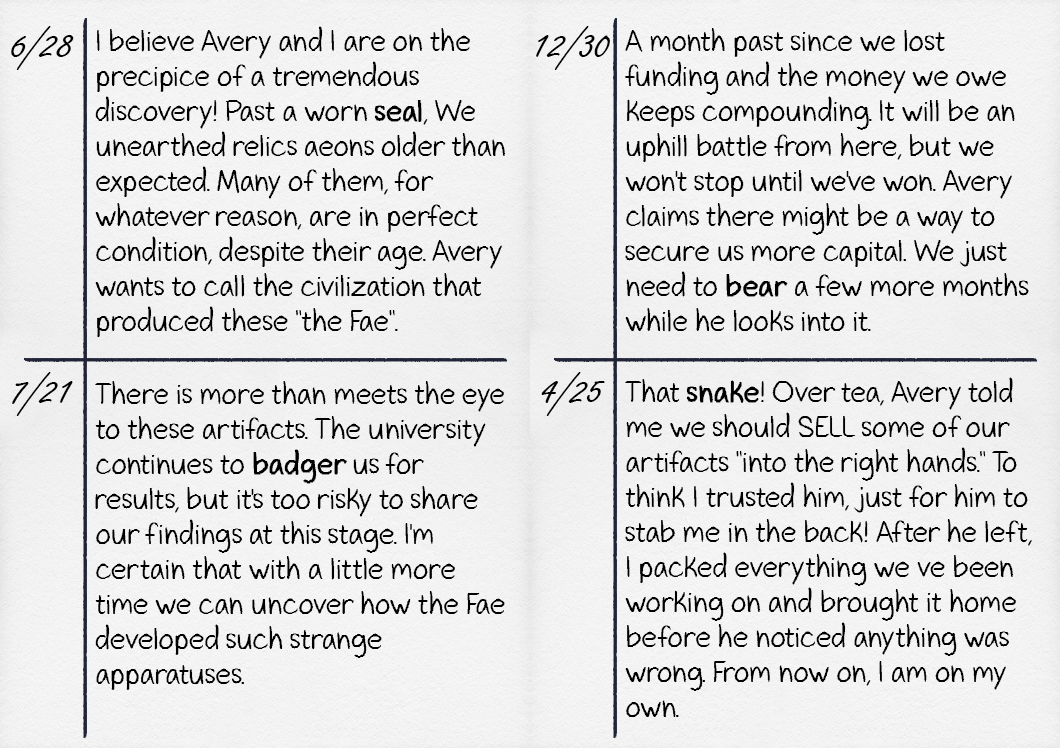
<style>
.page{position:relative;width:1060px;height:750px}
.page>*{position:absolute;margin:0}
.t1{font:45px "FreestyleScript-Regular";color:#000000}
.t2{font:29.2px "GavinScript2";color:#000000}
.t3{font:29.2px "GavinScript2";color:#000000;font-weight:bold}
</style>
<div class="page">
<p class="t1" style="left:11px;top:26px;width:63px;height:44px">6/28</p>
<p class="t2" style="left:95px;top:26px;width:411px;height:311px">I believe Avery and I are on the precipice of a tremendous discovery! Past a worn <span class="t3">seal</span>, We unearthed relics aeons older than expected. Many of them, for whatever reason, are in perfect condition, despite their age. Avery wants to call the civilization that produced these "the Fae".</p>
<p class="t1" style="left:536px;top:26px;width:74px;height:44px">12/30</p>
<p class="t2" style="left:625px;top:28px;width:404px;height:304px">A month past since we lost funding and the money we owe keeps compounding. It will be an uphill battle from here, but we won't stop until we've won. Avery claims there might be a way to secure us more capital. We just need to <span class="t3">bear </span>a few more months while he looks into it.</p>
<p class="t1" style="left:12px;top:372px;width:61px;height:44px">7/21</p>
<p class="t1" style="left:541px;top:372px;width:64px;height:44px">4/25</p>
<p class="t2" style="left:625px;top:377px;width:407px;height:340px">That <span class="t3">snake</span>! Over tea, Avery told me we should SELL some of our artifacts "into the right hands." To think I trusted him, just for him to stab me in the back! After he left, I packed everything we’ve been working on and brought it home before he noticed anything was wrong. From now on, I am on my own.</p>
<p class="t2" style="left:95px;top:381px;width:410px;height:309px">There is more than meets the eye to these artifacts. The university continues to <span class="t3">badger</span> us for results, but it's too risky to share our findings at this stage. I'm certain that with a little more time we can uncover how the Fae developed such strange apparatuses.</p>
</div>
